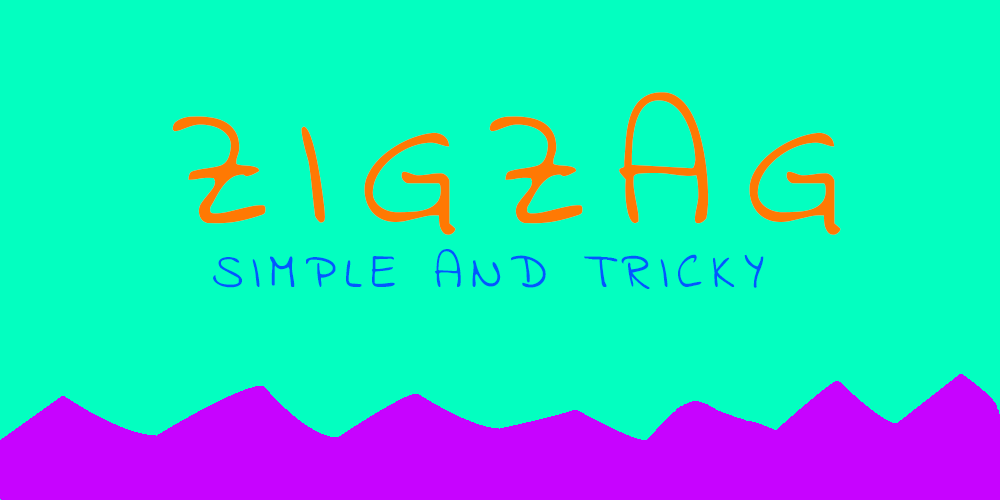
<style>
.page{position:relative;width:1000px;height:500px;background:#03ffc0}
.page>*{position:absolute;margin:0}
.t1{font:172px "IndieFlower";letter-spacing:0.18em;color:#ff7903;text-transform:uppercase}
.t2{font:50px "IndieFlower";letter-spacing:0.18em;color:#0356ff;text-transform:uppercase}
</style>
<div class="page">
<p class="t1" style="left:172px;top:92px;width:669px;height:143px">Zigzag</p>
<p class="t2" style="left:213px;top:249px;width:551px;height:40px">Simple and tricky</p>
</div>
